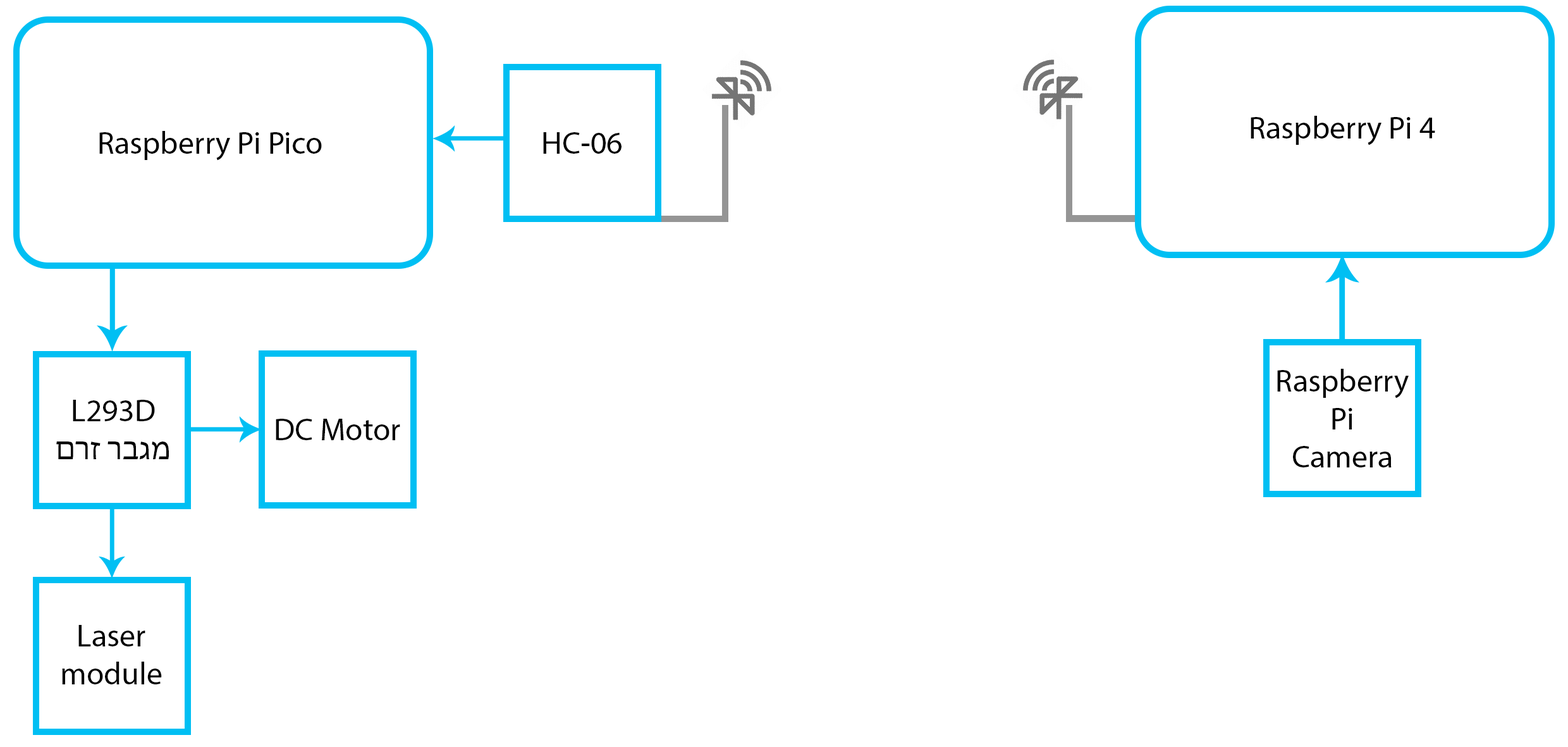
<style>
.page{position:relative;width:1568px;height:747px;background:#ffffff}
.page>*{position:absolute;margin:0}
.t1{font:31.6px "MyriadHebrew-Regular";color:#000000}
</style>
<div class="page">
<p class="t1" style="left:1251px;top:116px;width:184px;height:29px">Raspberry Pi 4</p>
<p class="t1" style="left:99px;top:131px;width:223px;height:30px">Raspberry Pi Pico</p>
<p class="t1" style="left:543px;top:132px;width:79px;height:22px">HC-06</p>
<p class="t1" style="left:1277px;top:369px;width:132px;height:98px;text-align:center">Raspberry<br>Pi<br>Camera</p>
<p class="t1" style="left:56px;top:400px;width:113px;height:59px;text-align:center">L293D<br>מגבר זרם</p>
<p class="t1" style="left:276px;top:419px;width:124px;height:21px">DC Motor</p>
<p class="t1" style="left:62px;top:625px;width:100px;height:59px;text-align:center">Laser<br>module</p>
</div>
